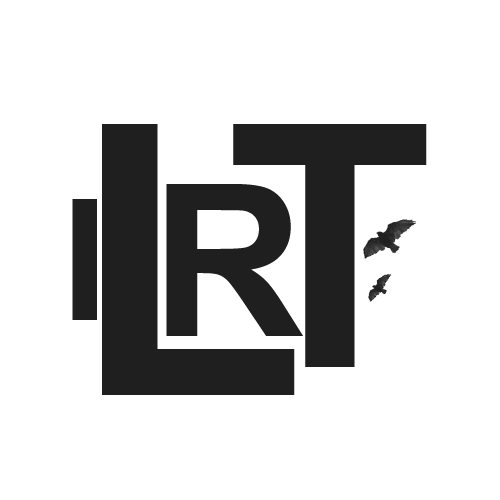
<style>
.page{position:relative;width:500px;height:500px;background:#ffffff}
.page>*{position:absolute;margin:0}
.t1{font:381px "Arial-BoldMT";color:#1f1f1f}
.t2{font:338.7px "Arial-BoldMT";color:#1f1f1f}
.t3{font:211.7px "Arial-BoldMT";color:#1f1f1f}
.t4{font:169.3px "Arial-BoldMT";color:#1f1f1f}
</style>
<div class="page">
<p class="t1" style="left:102px;top:124px;width:193px;height:271px">L</p>
<p class="t2" style="left:233px;top:124px;width:194px;height:243px">T</p>
<p class="t3" style="left:166px;top:184px;width:137px;height:152px">R</p>
<p class="t4" style="left:72px;top:199px;width:25px;height:121px">I</p>
</div>
